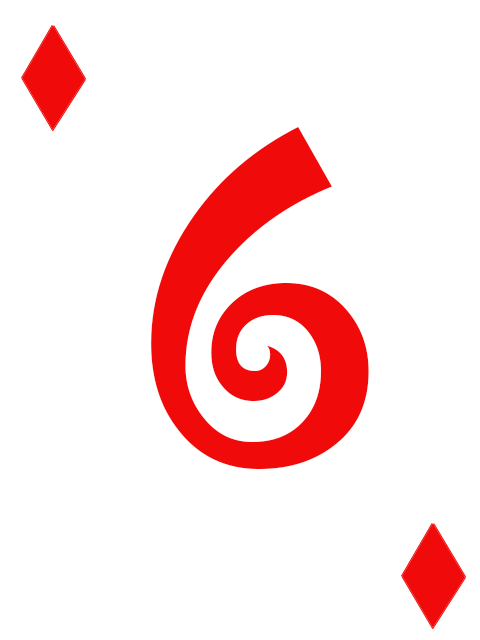
<style>
.page{position:relative;width:480px;height:640px;background:#ffffff}
.page>*{position:absolute;margin:0}
.t1{font:386.3px "Jokerman-Regular";color:#f10a0a}
</style>
<div class="page">
<p class="t1" style="left:151px;top:127px;width:218px;height:342px">6</p>
</div>
